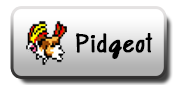
<style>
.page{position:relative;width:180px;height:85px;background:#ffffff}
.page>*{position:absolute;margin:0}
.t1{font:32.6px "WRTishKid";color:#000000;font-weight:bold}
</style>
<div class="page">
<p class="t1" style="left:76px;top:33px;width:77px;height:26px">Pidgeot</p>
</div>
